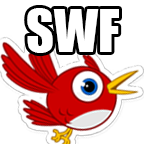
<style>
.page{position:relative;width:144px;height:144px;background:#ffffff}
.page>*{position:absolute;margin:0}
.t1{font:53.9px "Impact";color:#ffffff}
</style>
<div class="page">
<p class="t1" style="left:27px;top:8px;width:92px;height:45px">SWF</p>
</div>
